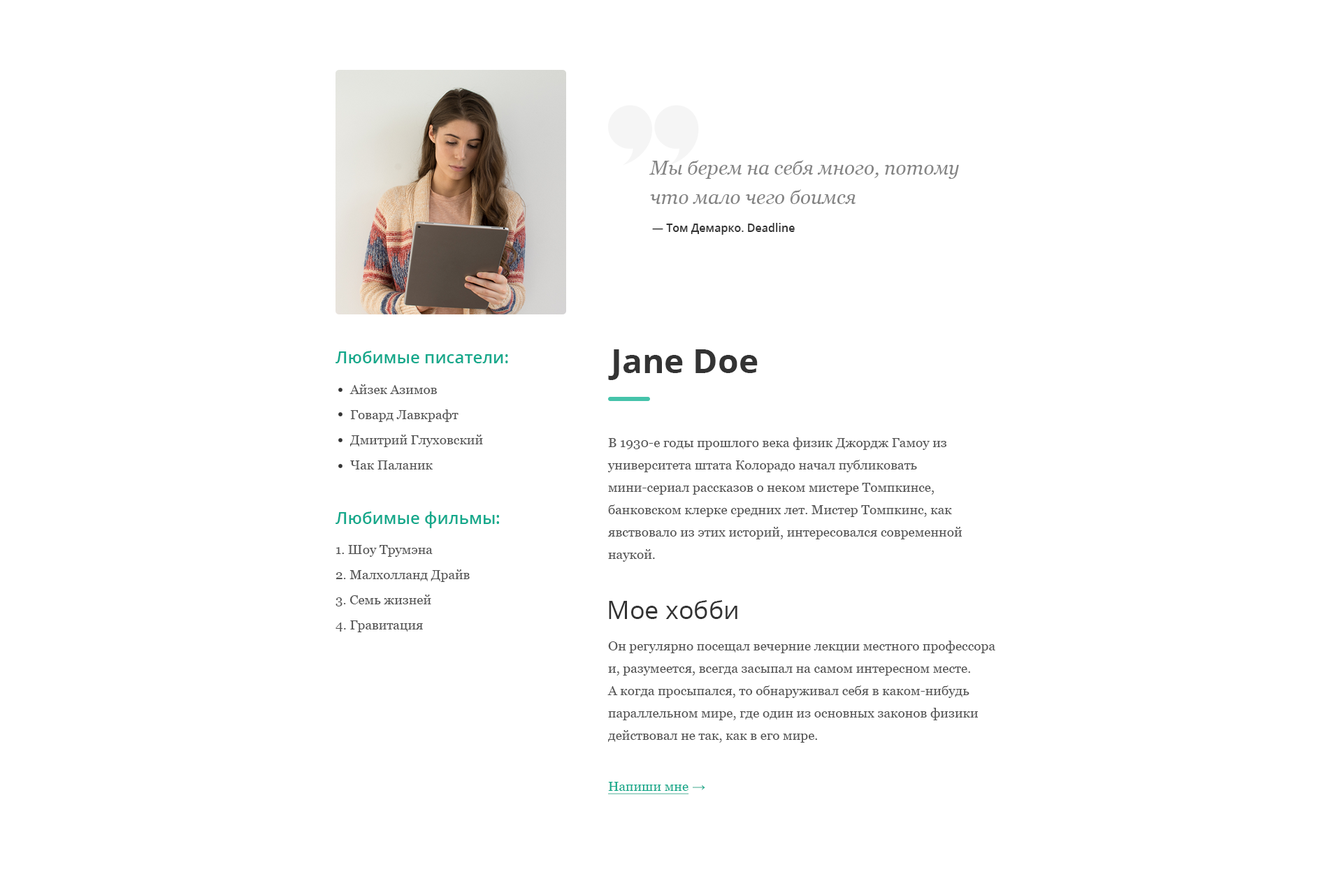
<style>
.page{position:relative;width:1342px;height:888px;background:#ffffff}
.page>*{position:absolute;margin:0}
.t1{font:19.6px/29.4px "Georgia-Italic";color:#848484}
.t2{font:11.2px "OpenSans-SemiBold";color:#333333}
.t3{font:16.8px "OpenSans-SemiBold";color:#15a98c}
.t4{font:33.6px "OpenSans-Bold";color:#333333}
.t5{font:13.3px/25.2px "Georgia";color:#555555}
.t6{font:13.3px/22.4px "Georgia";color:#555555}
.t7{font:25.2px "OpenSans-Regular";color:#333333}
.t8{font:13.3px "Georgia";color:#15a98b;text-decoration:underline}
.t9{font:13.3px "ArialMT";color:#15a98b}
</style>
<div class="page">
<p class="t1" style="left:649px;top:160px;width:310px;height:44px">Мы берем на себя много, потому что мало чего боимся</p>
<p class="t2" style="left:652px;top:223px;width:143px;height:12px">— Том Демарко. Deadline</p>
<p class="t3" style="left:336px;top:351px;width:172px;height:12px">Любимые писатели:</p>
<p class="t4" style="left:608px;top:350px;width:150px;height:30px">Jane Doe</p>
<p class="t5" style="left:350px;top:384px;width:133px;height:86px">Айзек Азимов<br>Говард Лавкрафт<br>Дмитрий Глуховский<br>Чак Паланик</p>
<p class="t6" style="left:607px;top:438px;width:356px;height:124px">В 1930-е годы прошлого века физик Джордж Гамоу из университета штата Колорадо начал публиковать мини-сериал рассказов о неком мистере Томпкинсе, банковском клерке средних лет. Мистер Томпкинс, как явствовало из этих историй, интересовался современной наукой.</p>
<p class="t3" style="left:336px;top:512px;width:163px;height:16px">Любимые фильмы:</p>
<p class="t5" style="left:336px;top:545px;width:134px;height:88px">1. Шоу Трумэна<br>2. Малхолланд Драйв<br>3. Семь жизней<br>4. Гравитация</p>
<p class="t7" style="left:609px;top:600px;width:128px;height:19px">Мое хобби</p>
<p class="t6" style="left:607px;top:641px;width:388px;height:102px">Он регулярно посещал вечерние лекции местного профессора и, разумеется, всегда засыпал на самом интересном месте. <br>А когда просыпался, то обнаруживал себя в каком-нибудь параллельном мире, где один из основных законов физики действовал не так, как в его мире.</p>
<p class="t8" style="left:608px;top:782px;width:97px;height:13px">Напиши мне<span class="t9"> →</span></p>
</div>
